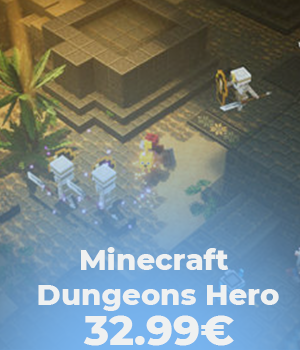
<style>
.page{position:relative;width:300px;height:350px}
.page>*{position:absolute;margin:0}
.t1{font:29.2px "Montserrat-ExtraBold";color:#f0f1f2}
.t2{font:41.7px "Montserrat-ExtraBold";color:#f0f1f2}
</style>
<div class="page">
<p class="t1" style="left:38px;top:247px;width:241px;height:64px;text-align:center">Minecraft <br>Dungeons Hero</p>
<p class="t2" style="left:83px;top:315px;width:151px;height:31px">32.99€</p>
</div>
